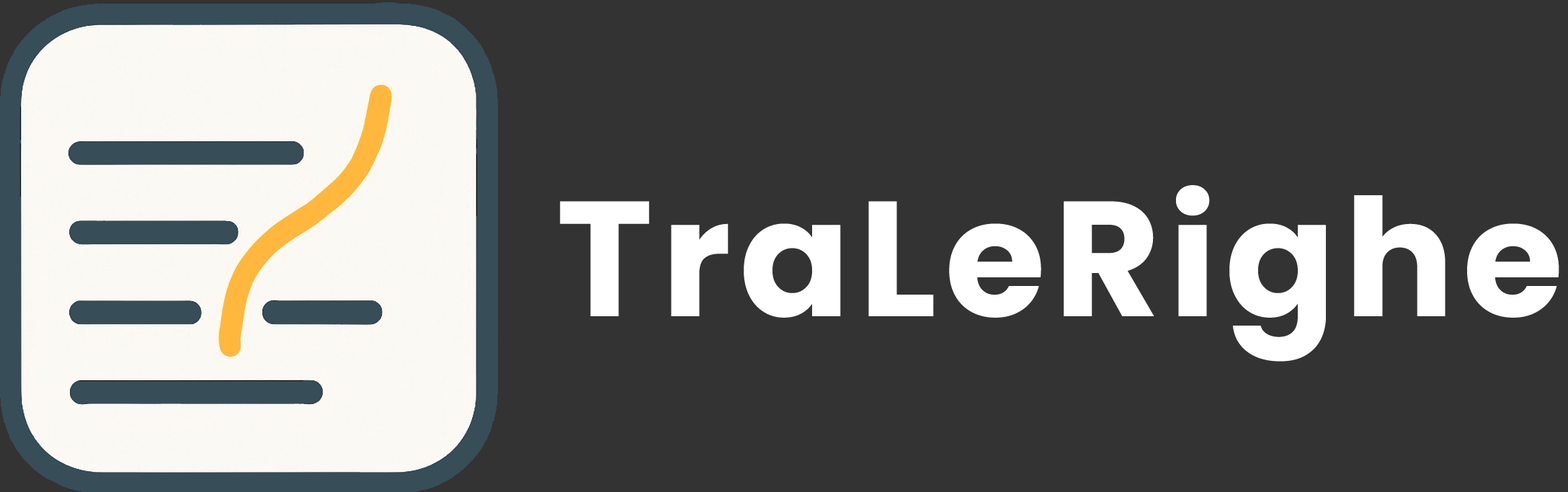
<style>
.page{position:relative;width:1568px;height:492px;background:#333333}
.page>*{position:absolute;margin:0}
.t1{font:163.6px "Poppins-Bold";letter-spacing:0.05em;color:#ffffff}
</style>
<div class="page">
<p class="t1" style="left:560px;top:185px;width:999px;height:177px">TraLeRighe</p>
</div>
